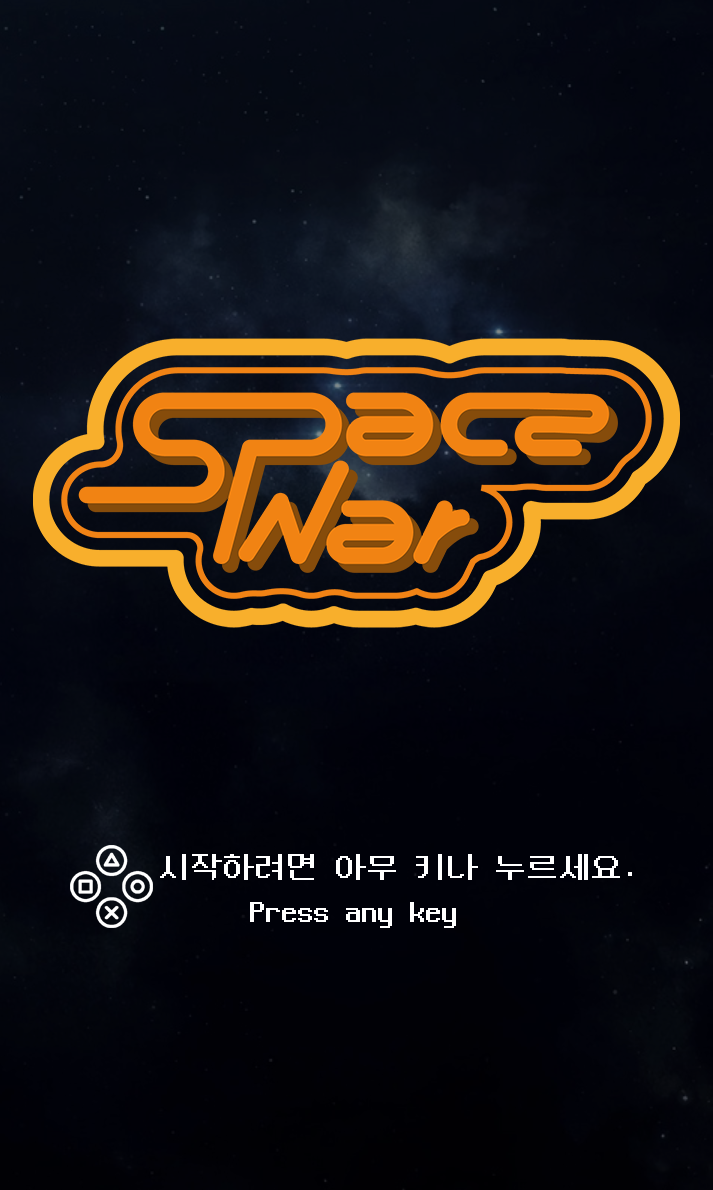
<style>
.page{position:relative;width:713px;height:1190px}
.page>*{position:absolute;margin:0}
.t1{font:32px "NeoDunggeunmo-Regular";color:#ffffff}
</style>
<div class="page">
<p class="t1" style="left:160px;top:854px;width:472px;height:26px">시작하려면 아무 키나 누르세요.</p>
<p class="t1" style="left:250px;top:902px;width:206px;height:26px">Press any key</p>
</div>
